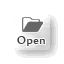
<style>
.page{position:relative;width:64px;height:64px;background:#ffffff}
.page>*{position:absolute;margin:0}
.t1{font:11px "AmiraParadiso";letter-spacing:0.05em;color:#424242}
</style>
<div class="page">
<p class="t1" style="left:17px;top:36px;width:28px;height:10px">Open</p>
</div>
